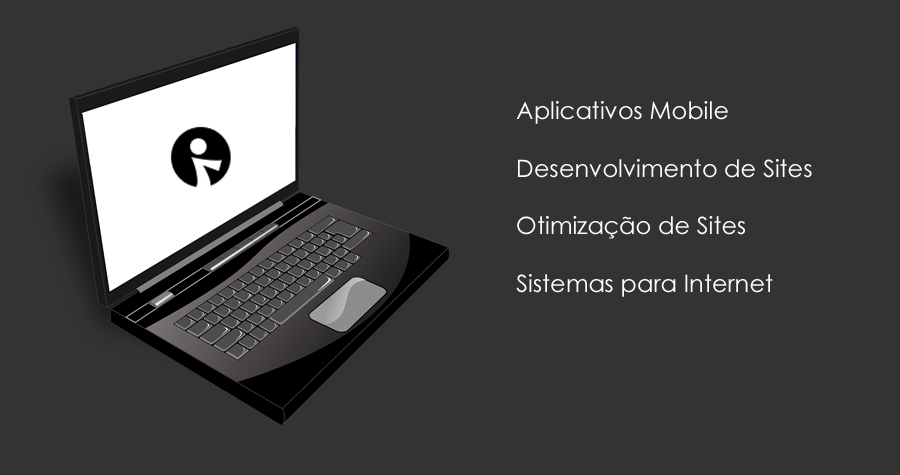
<style>
.page{position:relative;width:900px;height:475px;background:#333333}
.page>*{position:absolute;margin:0}
.t1{font:24px "CenturyGothic";color:#fefefe}
</style>
<div class="page">
<p class="t1" style="left:516px;top:101px;width:296px;height:196px">Aplicativos Mobile<br><br>Desenvolvimento de Sites<br><br>Otimização de Sites<br><br>Sistemas para Internet</p>
</div>
